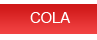
<style>
.page{position:relative;width:97px;height:40px;background:#ffffff}
.page>*{position:absolute;margin:0}
.t1{font:14.7px "ArialMT";color:#ffffff}
</style>
<div class="page">
<p class="t1" style="left:30px;top:12px;width:41px;height:11px">COLA</p>
</div>
